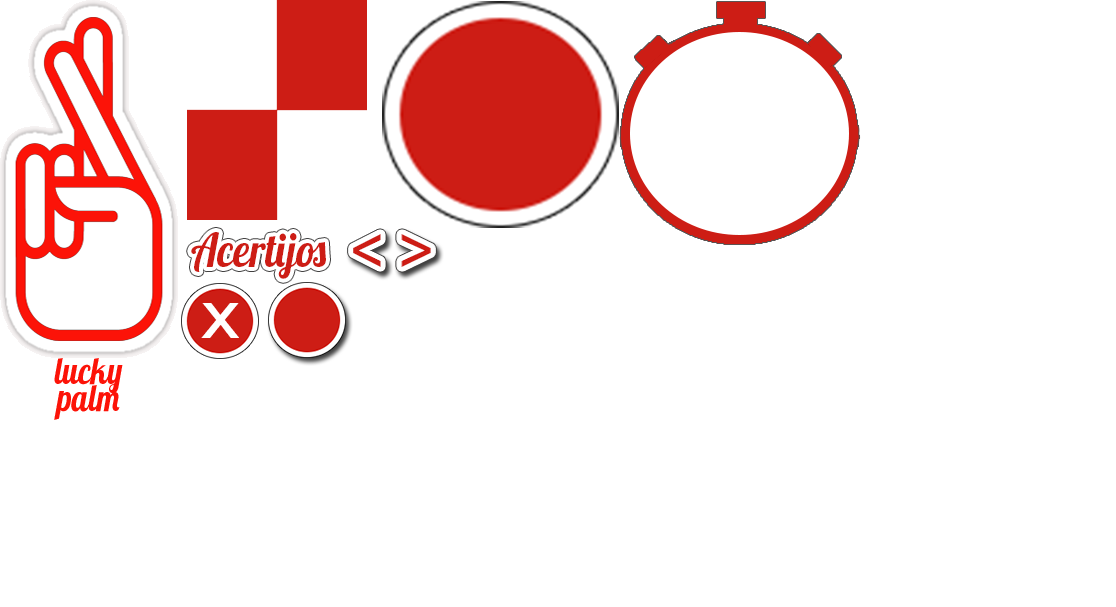
<style>
.page{position:relative;width:1116px;height:607px;background:#ffffff}
.page>*{position:absolute;margin:0}
.t1{font:66.8px "ArialMT";color:#ffffff;scale:1.17 1}
.t2{font:37.8px/11.3px "Lobster1.4";color:#fc1308;scale:0.84 1}
</style>
<div class="page">
<p class="t1" style="left:201px;top:303px;width:38px;height:35px">x</p>
<p class="t2" style="left:54px;top:358px;width:69px;height:62px;text-align:center">lucky<br>palm</p>
</div>
